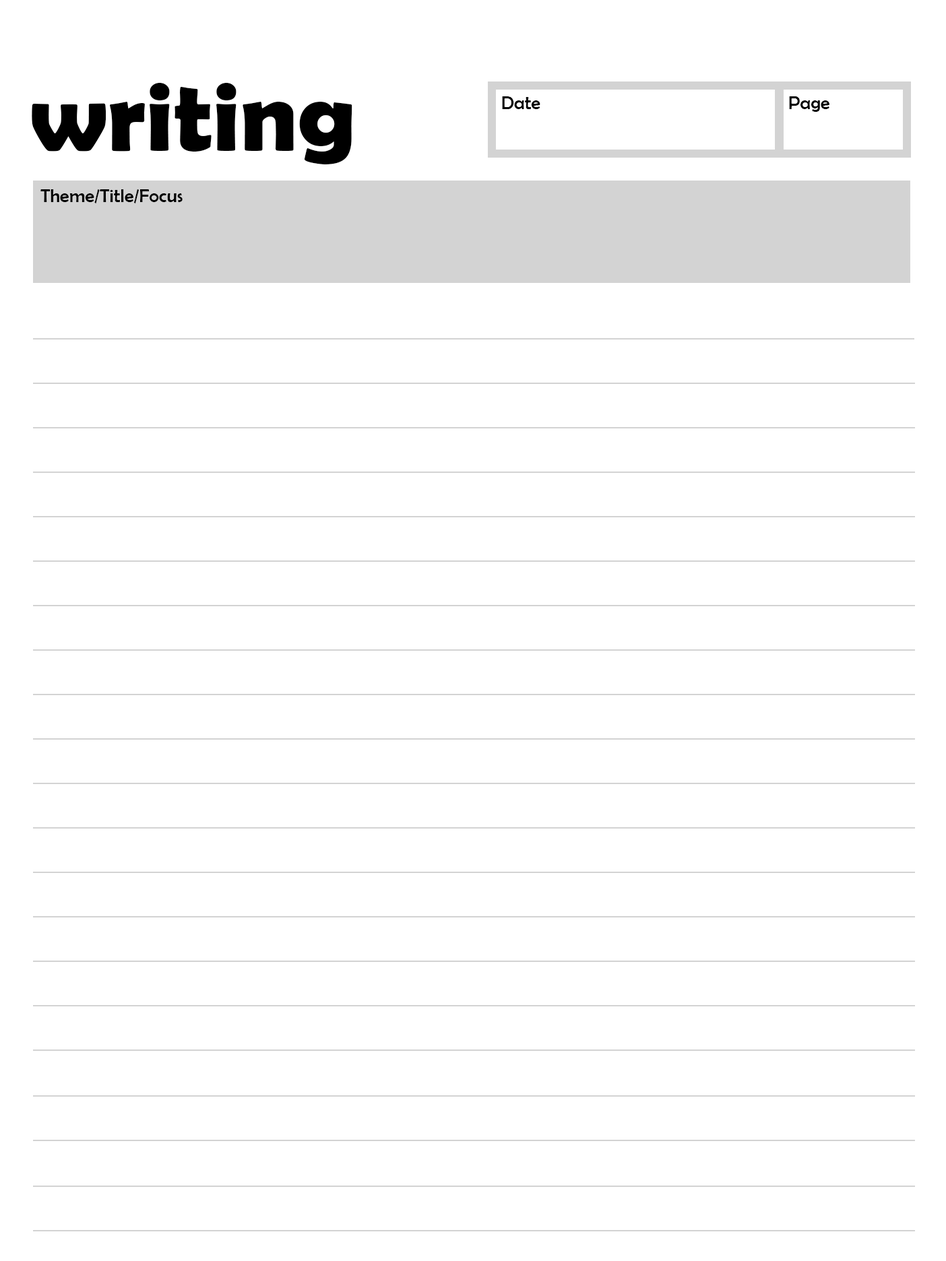
<style>
.page{position:relative;width:946px;height:1261px;background:#ffffff}
.page>*{position:absolute;margin:0}
.t1{font:101.5px "BerlinSansFBDemi-Bold";color:#000000}
.t2{font:19px "BerlinSansFB-Reg";color:#000000}
</style>
<div class="page">
<p class="t1" style="left:32px;top:83px;width:320px;height:81px">writing</p>
<p class="t2" style="left:502px;top:96px;width:38px;height:13px">Date</p>
<p class="t2" style="left:789px;top:96px;width:40px;height:16px">Page</p>
<p class="t2" style="left:40px;top:189px;width:143px;height:14px">Theme/Title/Focus</p>
</div>
